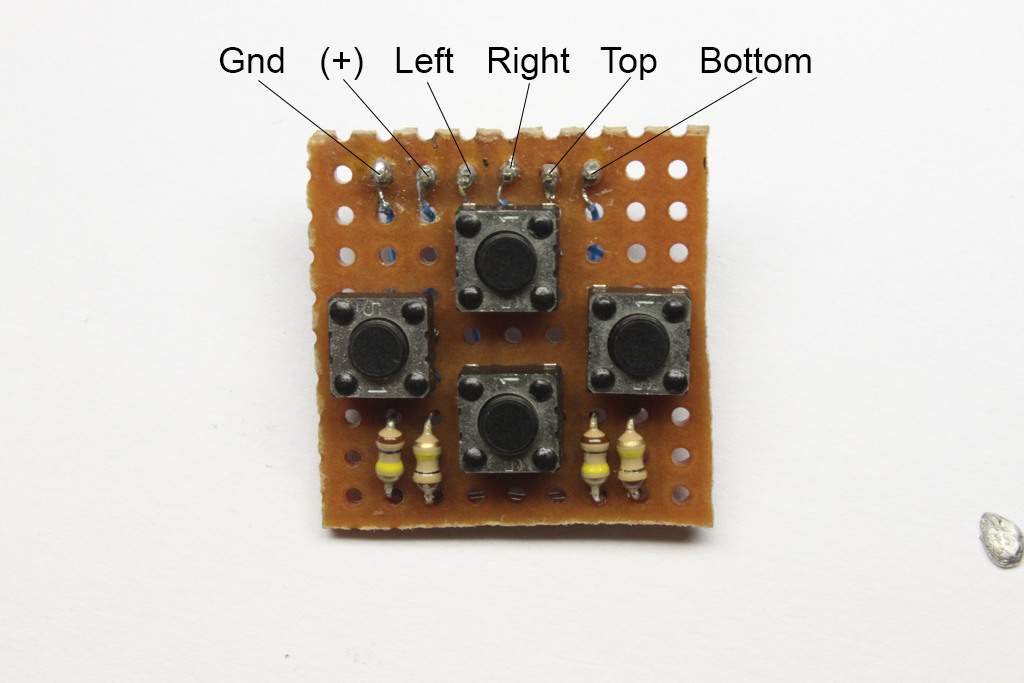
<style>
.page{position:relative;width:1024px;height:683px}
.page>*{position:absolute;margin:0}
.t1{font:36px "ArialMT";color:#000000}
</style>
<div class="page">
<p class="t1" style="left:219px;top:47px;width:65px;height:26px">Gnd</p>
<p class="t1" style="left:321px;top:47px;width:42px;height:33px">(+)</p>
<p class="t1" style="left:396px;top:47px;width:58px;height:26px">Left</p>
<p class="t1" style="left:489px;top:47px;width:81px;height:33px">Right</p>
<p class="t1" style="left:600px;top:47px;width:57px;height:33px">Top</p>
<p class="t1" style="left:701px;top:47px;width:110px;height:26px">Bottom</p>
</div>
